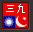
<style>
.page{position:relative;width:33px;height:32px;background:#f20000}
.page>*{position:absolute;margin:0}
.t1{font:10.4px "SimSun";color:#ffffff}
</style>
<div class="page">
<p class="t1" style="left:6px;top:4px;width:19px;height:9px">三九</p>
</div>
